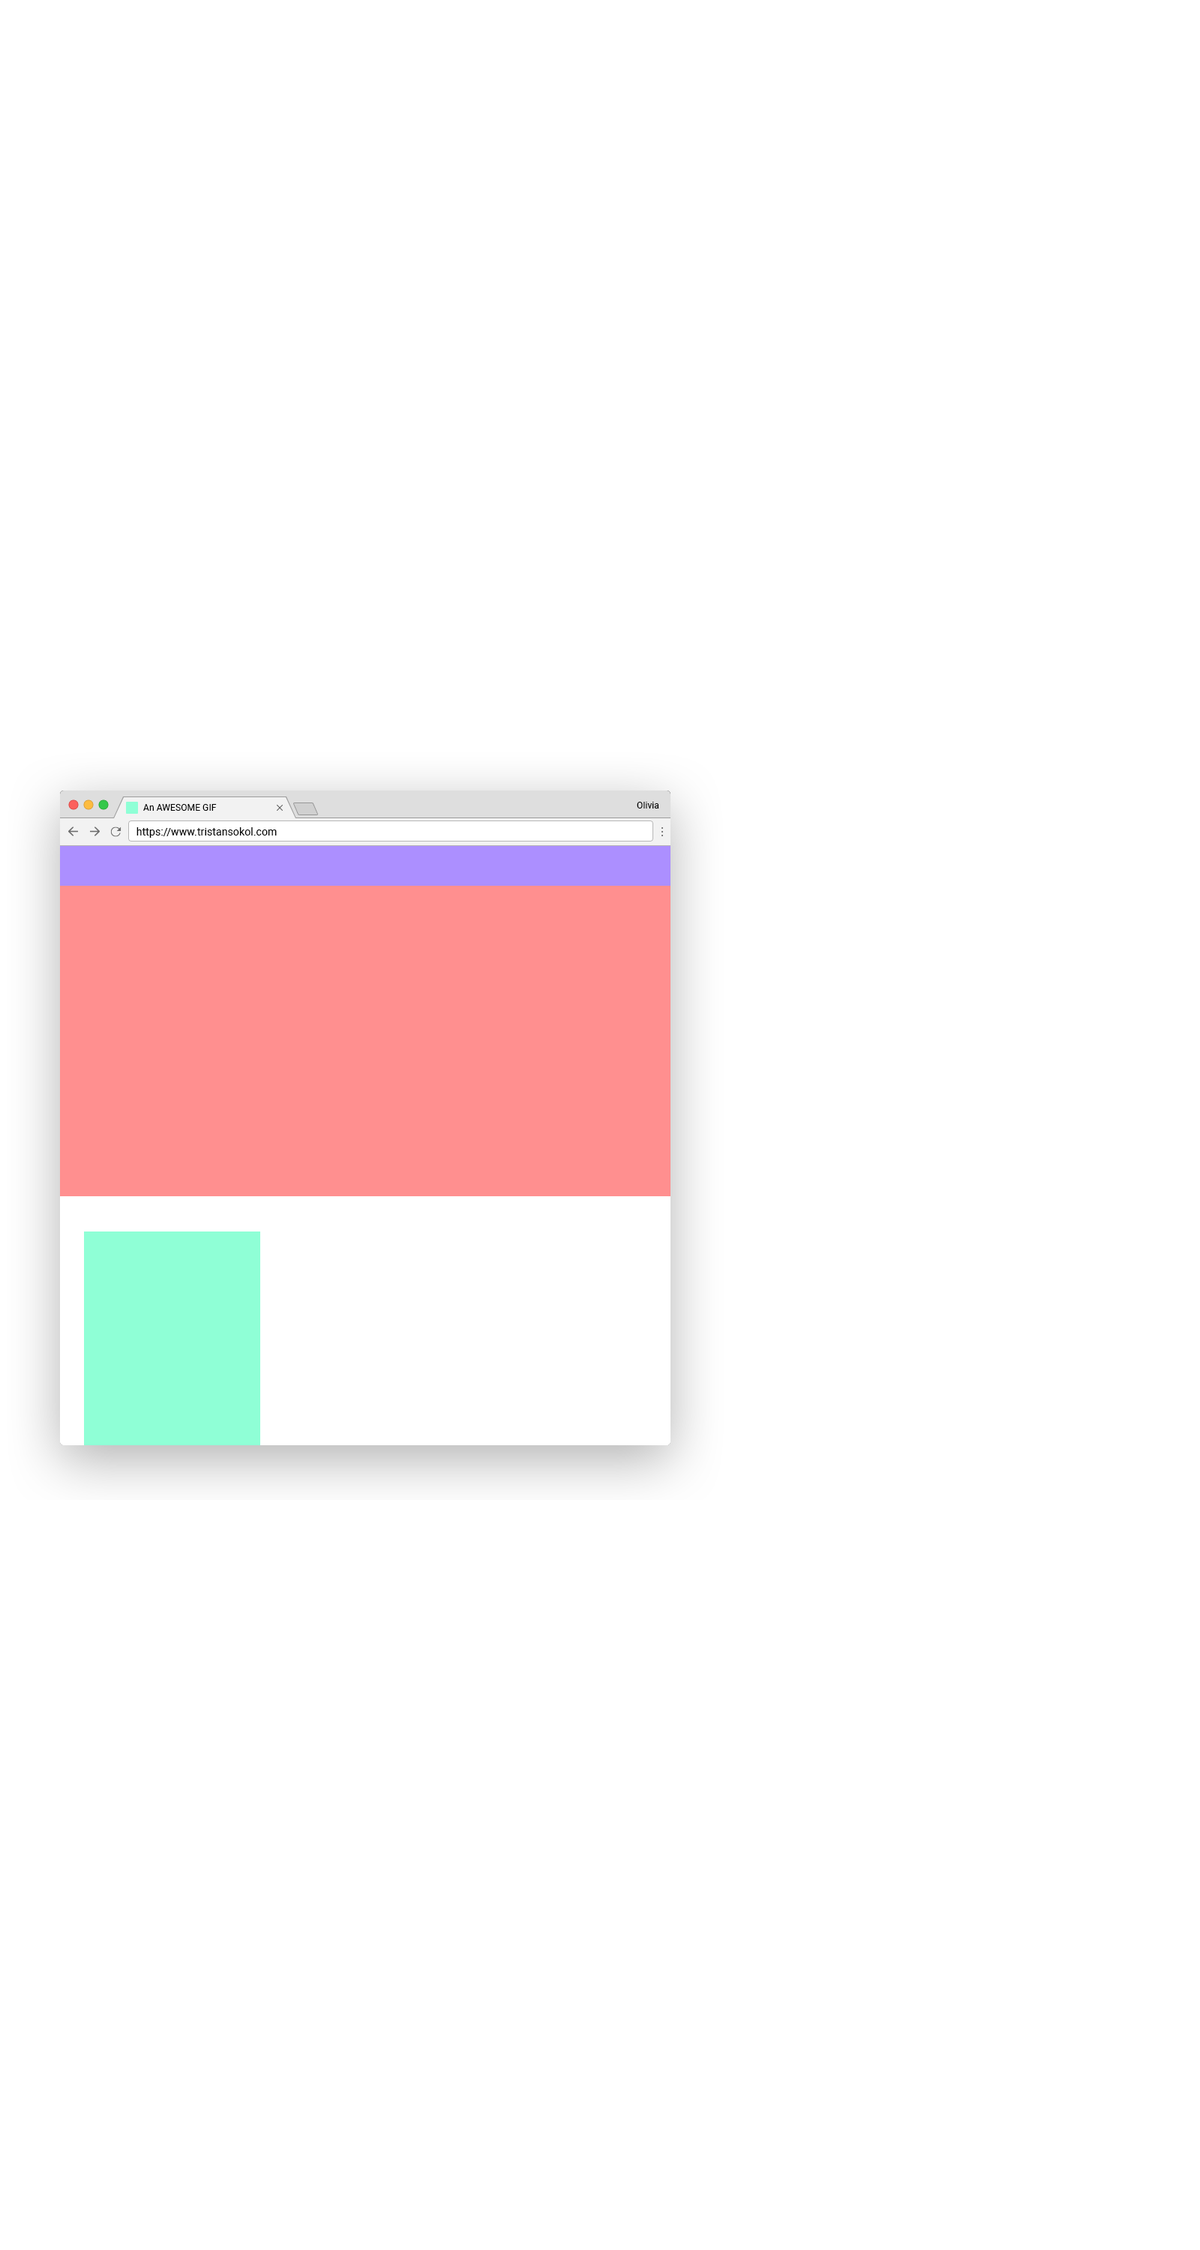
<style>
.page{position:relative;width:1200px;height:2250px;background:#ffffff}
.page>*{position:absolute;margin:0}
.t1{font:9px "Roboto-Regular";letter-spacing:0.008em;color:#000000}
.t2{font:10.5px "Roboto-Regular";letter-spacing:0.008em;color:#000000}
</style>
<div class="page">
<p class="t1" style="left:143px;top:804px;width:74px;height:7px">An AWESOME GIF</p>
<p class="t1" style="left:637px;top:802px;width:22px;height:6px">Olivia</p>
<p class="t2" style="left:136px;top:827px;width:141px;height:11px">https://www.tristansokol.com</p>
</div>
